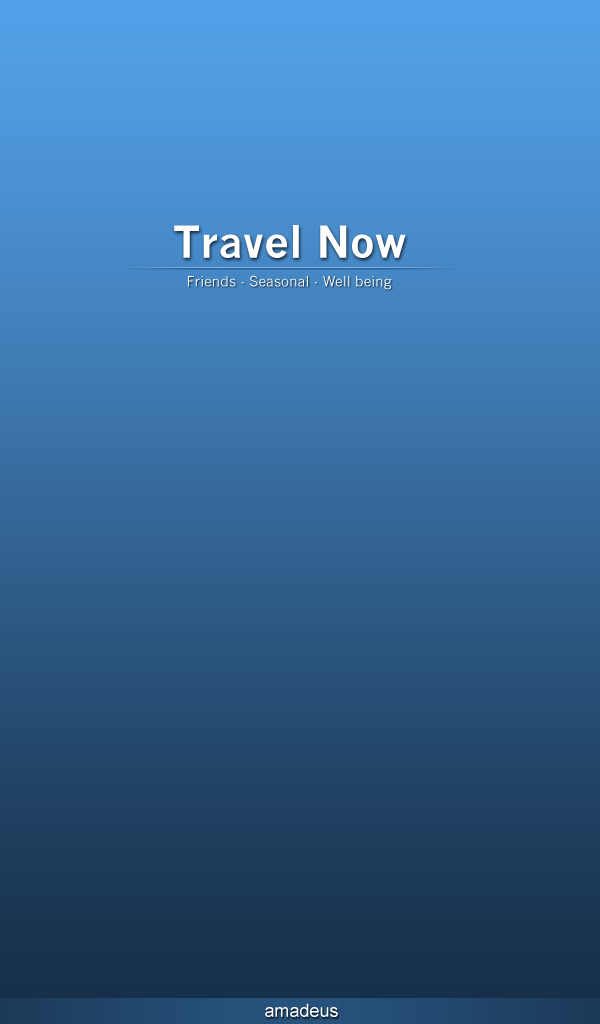
<style>
.page{position:relative;width:600px;height:1024px}
.page>*{position:absolute;margin:0}
.t1{font:42.9px "NewsGothicMT-Bold";color:#ffffff}
.t2{font:14.1px "NewsGothicMT";color:#ffffff}
.t3{font:18px "ArialMT";color:#ffffff}
</style>
<div class="page">
<p class="t1" style="left:174px;top:225px;width:232px;height:33px">Travel Now</p>
<p class="t2" style="left:188px;top:275px;width:204px;height:15px">Friends - Seasonal - Well being</p>
<p class="t3" style="left:265px;top:1003px;width:73px;height:14px">amadeus</p>
</div>
